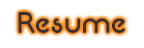
<style>
.page{position:relative;width:144px;height:48px;background:#ffffff}
.page>*{position:absolute;margin:0}
.t1{font:30px "Neon80s";color:#343232}
</style>
<div class="page">
<p class="t1" style="left:18px;top:12px;width:107px;height:21px">Resume</p>
</div>
